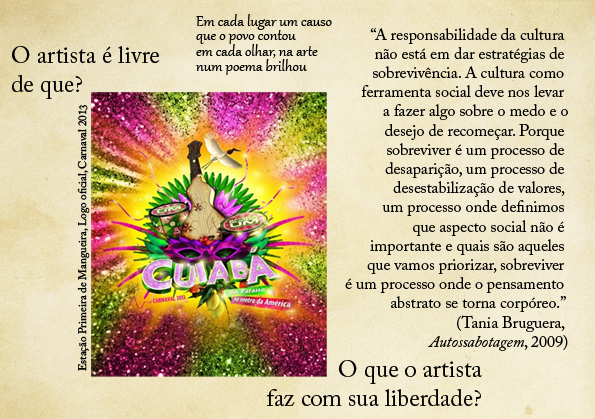
<style>
.page{position:relative;width:595px;height:419px}
.page>*{position:absolute;margin:0}
.t1{font:18px "Gabriola";color:#000000}
.t2{font:16px "ACaslonPro-Regular";color:#000000}
.t3{font:16px "ACaslonPro-Italic";color:#000000}
.t4{font:24px "ACaslonPro-Regular";color:#000000}
.t5{font:11px "ACaslonPro-Regular";color:#000000}
</style>
<div class="page">
<p class="t1" style="left:196px;top:14px;width:136px;height:16px">Em cada lugar um causo</p>
<p class="t1" style="left:196px;top:30px;width:100px;height:14px">que o povo contou</p>
<p class="t2" style="left:345px;top:27px;width:223px;height:324px;text-align:right">“A responsabilidade da cultura <br>não está em dar estratégias de <br>sobrevivência. A cultura como <br>ferramenta social deve nos levar <br>a fazer algo sobre o medo e o<br>desejo de recomeçar. Porque <br>sobreviver é um processo de <br>desaparição, um processo de <br>desestabilização de valores, <br>um processo onde definimos <br>que aspecto social não é <br>importante e quais são aqueles <br>que vamos priorizar, sobreviver <br>é um processo onde o pensamento <br>abstrato se torna corpóreo.” <br>(Tania Bruguera, <br><span class="t3">Autossabotagem</span>, 2009)</p>
<p class="t4" style="left:12px;top:46px;width:148px;height:53px">O artista é livre <br>de que?</p>
<p class="t1" style="left:196px;top:44px;width:122px;height:14px">em cada olhar, na arte</p>
<p class="t1" style="left:195px;top:59px;width:112px;height:16px">num poema brilhou</p>
<p class="t5" style="left:77px;top:105px;width:13px;height:266px;rotate:-90deg">Estação Primeira de Mangueira, Logo oficial, Carnaval 2013</p>
<p class="t4" style="left:267px;top:360px;width:215px;height:46px;text-align:right">O que o artista<br>faz com sua liberdade?</p>
</div>
